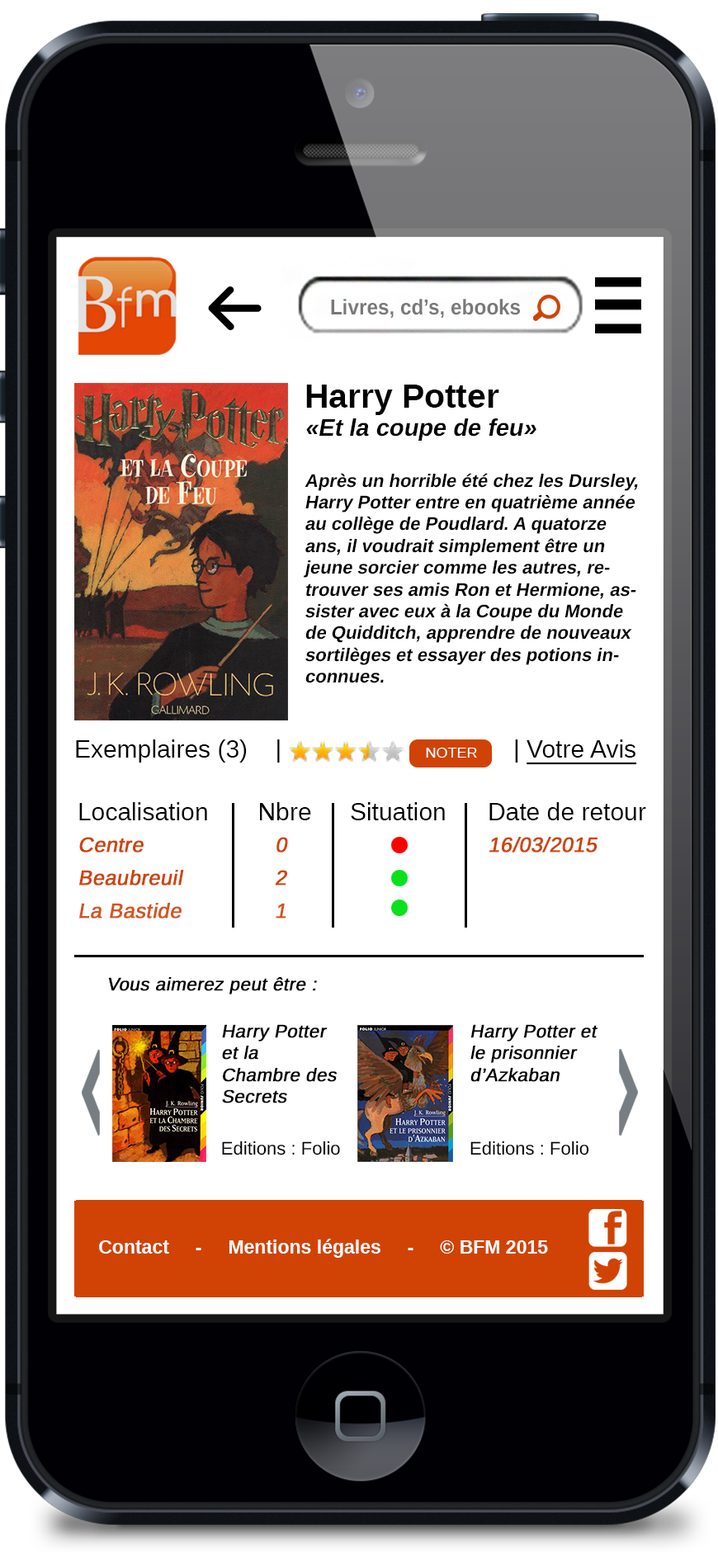
<style>
.page{position:relative;width:718px;height:1568px;background:#ffffff}
.page>*{position:absolute;margin:0}
.t1{font:21.5px "LiberationSans-Bold";color:#797979;scale:0.93 1}
.t2{font:18.2px "LiberationSans-Bold";color:#000000;font-style:italic}
.t3{font:33.6px "LiberationSans-Bold";color:#000000}
.t4{font:23.9px "LiberationSans-Bold";color:#000000;font-style:italic}
.t5{font:24.8px "LiberationSans-Regular";color:#000000}
.t6{font:14.9px "LiberationSans-Regular";color:#ffffff}
.t7{font:24.8px "LiberationSans-Regular";color:#000000;text-decoration:underline}
.t8{font:20.6px "LiberationSans-Regular";color:#d04304;font-weight:bold;font-style:italic}
.t9{font:20.6px "LiberationSans-Regular";color:#d4541e;font-weight:bold;font-style:italic}
.t10{font:18.2px "LiberationSans-Regular";color:#000000;font-weight:bold;font-style:italic}
.t11{font:18.2px "LiberationSans-Regular";color:#000000}
.t12{font:19px "LiberationSans-Bold";color:#ffffff}
</style>
<div class="page">
<p class="t1" style="left:331px;top:299px;width:189px;height:19px">Livres, cd’s, ebooks</p>
<p class="t2" style="left:304px;top:385px;width:334px;height:298px"><span class="t3">Harry Potter<br></span><span class="t4">«Et la coupe de feu»<br><br></span>Après un horrible été chez les Dursley, Harry Potter entre en quatrième année au collège de Poudlard. A quatorze ans, il voudrait simplement être un jeune sorcier comme les autres, retrouver ses amis Ron et Hermione, assister avec eux à la Coupe du Monde de Quidditch, apprendre de nouveaux sortilèges et essayer des potions inconnues.</p>
<p class="t5" style="left:76px;top:739px;width:204px;height:24px">Exemplaires (3)    |</p>
<p class="t6" style="left:426px;top:748px;width:51px;height:10px">NOTER</p>
<p class="t7" style="left:515px;top:739px;width:121px;height:26px"><span class="t5">| </span>Votre Avis</p>
<p class="t5" style="left:79px;top:802px;width:128px;height:18px">Localisation</p>
<p class="t5" style="left:260px;top:802px;width:51px;height:18px">Nbre</p>
<p class="t5" style="left:351px;top:802px;width:94px;height:18px">Situation</p>
<p class="t5" style="left:489px;top:802px;width:157px;height:18px">Date de retour</p>
<p class="t8" style="left:79px;top:837px;width:65px;height:15px">Centre</p>
<p class="t8" style="left:276px;top:837px;width:12px;height:15px">0</p>
<p class="t8" style="left:489px;top:837px;width:108px;height:15px">16/03/2015</p>
<p class="t8" style="left:79px;top:870px;width:105px;height:16px">Beaubreuil</p>
<p class="t8" style="left:275px;top:870px;width:12px;height:16px">2</p>
<p class="t9" style="left:79px;top:903px;width:103px;height:16px">La Bastide</p>
<p class="t9" style="left:276px;top:903px;width:10px;height:16px">1</p>
<p class="t10" style="left:108px;top:977px;width:209px;height:17px">Vous aimerez peut être :</p>
<p class="t10" style="left:222px;top:1024px;width:115px;height:79px">Harry Potter et la Chambre des Secrets</p>
<p class="t10" style="left:470px;top:1024px;width:127px;height:58px">Harry Potter et le prisonnier d’Azkaban</p>
<p class="t11" style="left:222px;top:1141px;width:118px;height:14px">Editions : Folio</p>
<p class="t11" style="left:470px;top:1141px;width:119px;height:14px">Editions : Folio</p>
<p class="t12" style="left:99px;top:1239px;width:449px;height:19px">Contact     -     Mentions légales     -     © BFM 2015</p>
</div>
